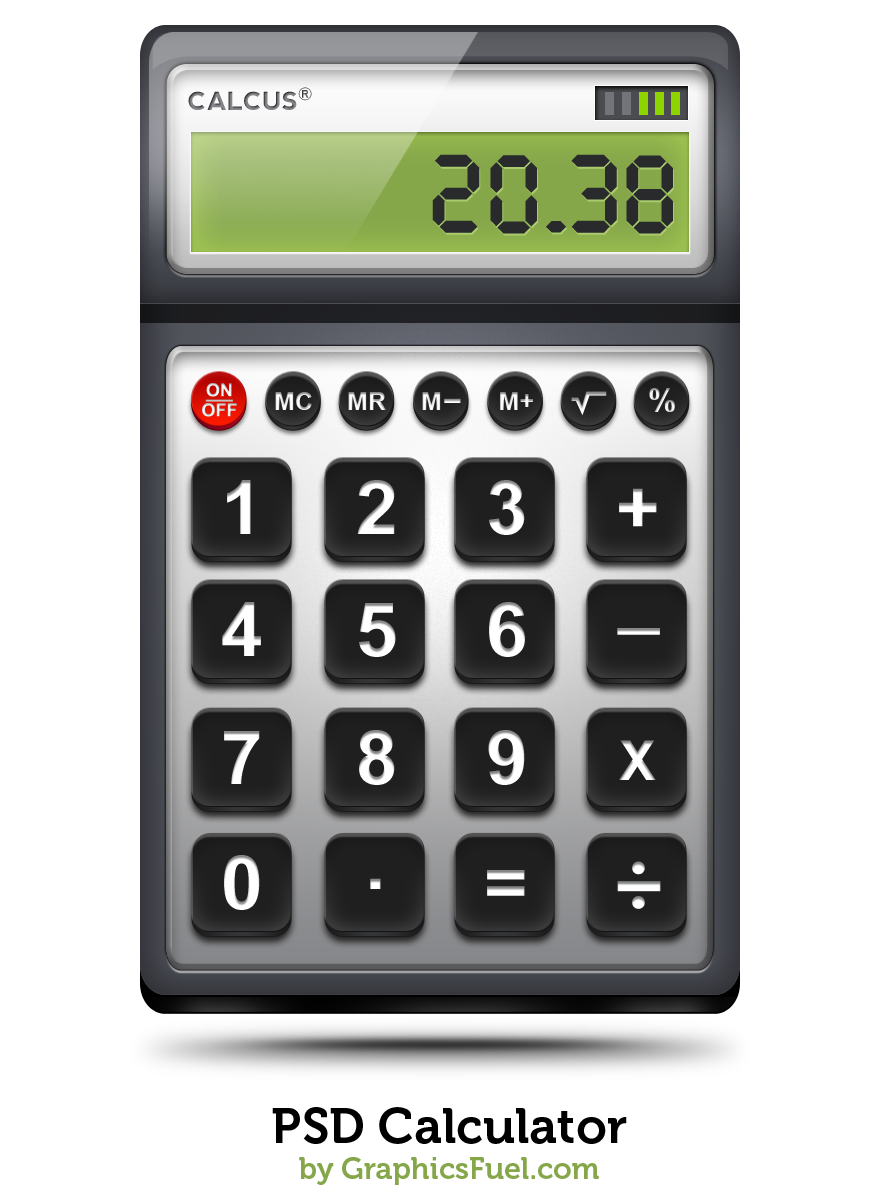
<style>
.page{position:relative;width:880px;height:1200px;background:#ffffff}
.page>*{position:absolute;margin:0}
.t1{font:25px "nevis-Bold";text-transform:uppercase}
.t2{font:30px "nevis-Bold";text-transform:uppercase}
.t3{font:125px "PocketCalculator";color:#292a2b;text-transform:uppercase}
.t4{font:18px/20px "Arial-BoldMT";text-transform:uppercase}
.t5{font:18px/17.1px "Arial-BoldMT";text-transform:uppercase;text-decoration:underline}
.t6{font:32.4px "Arial-BoldMT";text-transform:uppercase}
.t7{font:25px "Arial-BoldMT";text-transform:uppercase}
.t8{font:25px "Arial-BoldMT";color:#ececec;text-transform:uppercase}
.t9{font:25px "Arial-BoldMT";color:#ffffff;text-transform:uppercase}
.t10{font:25px "Arial-BoldMT";color:#f1f1f1;text-transform:uppercase}
.t11{font:75px "Arial-BoldMT";color:#ffffff;text-transform:uppercase}
.t12{font:55px "Arial-BoldMT";color:#ffffff;text-transform:uppercase}
.t13{font:75px "Arial-BoldMT";text-transform:uppercase}
</style>
<div class="page">
<p class="t1" style="left:188px;top:87px;width:124px;height:23px">calcus<span class="t2">®</span></p>
<p class="t3" style="left:432px;top:154px;width:241px;height:80px">20.38</p>
<p class="t4" style="left:202px;top:383px;width:35px;height:34px;text-align:center"><span class="t5">On<br></span>OFF</p>
<p class="t6" style="left:649px;top:388px;width:26px;height:24px">%</p>
<p class="t7" style="left:275px;top:392px;width:37px;height:18px">MC</p>
<p class="t8" style="left:348px;top:392px;width:38px;height:18px">MR</p>
<p class="t9" style="left:422px;top:392px;width:19px;height:18px">M</p>
<p class="t10" style="left:500px;top:392px;width:33px;height:18px">M+</p>
<p class="t11" style="left:227px;top:480px;width:24px;height:54px">1</p>
<p class="t11" style="left:357px;top:480px;width:38px;height:54px">2</p>
<p class="t11" style="left:489px;top:480px;width:36px;height:55px">3</p>
<p class="t11" style="left:619px;top:488px;width:38px;height:39px">+</p>
<p class="t11" style="left:222px;top:602px;width:39px;height:54px">4</p>
<p class="t11" style="left:359px;top:603px;width:37px;height:54px">5</p>
<p class="t11" style="left:489px;top:602px;width:36px;height:55px">6</p>
<p class="t11" style="left:224px;top:731px;width:36px;height:53px">7</p>
<p class="t11" style="left:359px;top:730px;width:36px;height:55px">8</p>
<p class="t11" style="left:488px;top:730px;width:37px;height:55px">9</p>
<p class="t12" style="left:619px;top:740px;width:37px;height:40px">x</p>
<p class="t11" style="left:224px;top:855px;width:36px;height:55px">0</p>
<p class="t13" style="left:487px;top:870px;width:38px;height:26px">=</p>
<p class="t11" style="left:370px;top:878px;width:11px;height:11px">.</p>
</div>
